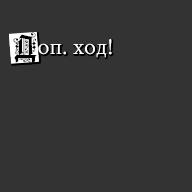
<style>
.page{position:relative;width:192px;height:192px;background:#333333}
.page>*{position:absolute;margin:0}
.t1{font:30px "FortunaGothicFlorishC";color:#000000}
.t2{font:24px "CrimsonText-Regular";color:#ffffff}
</style>
<div class="page">
<p class="t1" style="left:13px;top:32px;width:24px;height:33px">Д</p>
<p class="t2" style="left:38px;top:39px;width:74px;height:19px">оп. ход!</p>
</div>
